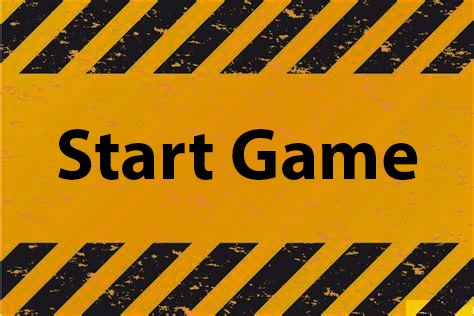
<style>
.page{position:relative;width:474px;height:316px}
.page>*{position:absolute;margin:0}
.t1{font:72.8px "MyriadPro-Bold";color:#000000}
</style>
<div class="page">
<p class="t1" style="left:58px;top:129px;width:360px;height:51px">Start Game</p>
</div>
